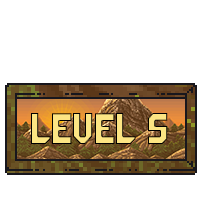
<style>
.page{position:relative;width:200px;height:200px;background:#ffffff}
.page>*{position:absolute;margin:0}
.t1{font:34.9px "GalacticaGridRegular";color:#fce583;scale:0.97 1}
</style>
<div class="page">
<p class="t1" style="left:31px;top:113px;width:137px;height:31px">Level 5</p>
</div>
